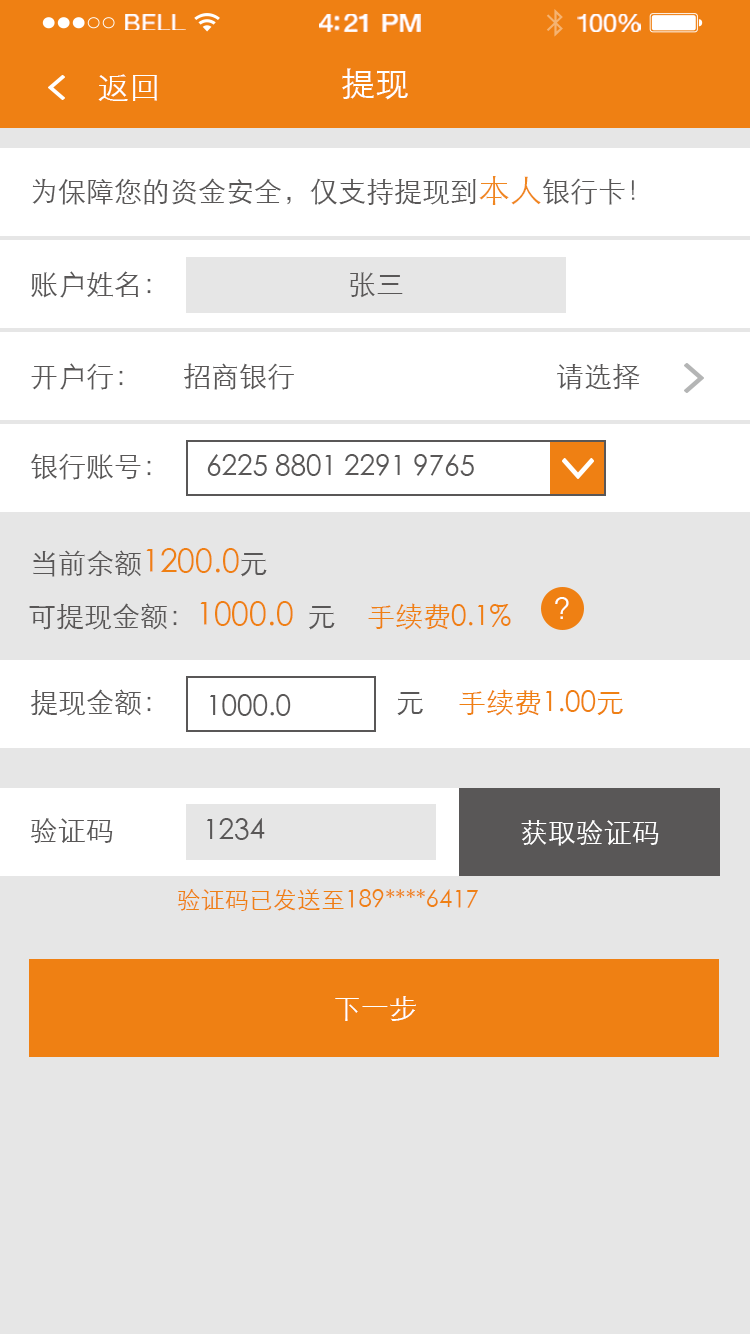
<style>
.page{position:relative;width:750px;height:1334px;background:#e6e6e6}
.page>*{position:absolute;margin:0}
.t1{font:23.3px "HelveticaNeue";letter-spacing:0.02em;color:#ffffff;scale:1.06 1}
.t2{font:25.3px "HelveticaNeue-Medium";letter-spacing:-0.02em;color:#ffffff;scale:1.06 1}
.t3{font:24.3px "HelveticaNeue";letter-spacing:-0.02em;color:#ffffff;scale:1.06 1}
.t4{font:32px "STXihei";color:#ffffff}
.t5{font:34px "STXihei";color:#ffffff}
.t6{font:28px "STXihei";color:#595757}
.t7{font:32px "STXihei";color:#f08720}
.t8{font:32px "STXihei";color:#ef8013}
.t9{font:28px "STXihei";color:#ef8013}
.t10{font:28px "STXihei";color:#ffffff}
.t11{font:24px "STXihei";color:#ef8013}
</style>
<div class="page">
<p class="t1" style="left:125px;top:14px;width:61px;height:16px">BELL</p>
<p class="t2" style="left:319px;top:14px;width:102px;height:18px">4:21 PM</p>
<p class="t3" style="left:577px;top:14px;width:64px;height:18px">100%</p>
<p class="t4" style="left:98px;top:74px;width:59px;height:27px">返回</p>
<p class="t5" style="left:342px;top:68px;width:66px;height:32px">提现</p>
<p class="t6" style="left:32px;top:176px;width:603px;height:29px">为保障您的资金安全，仅支持提现到<span class="t7">本人</span>银行卡！</p>
<p class="t6" style="left:31px;top:271px;width:120px;height:27px">账户姓名：</p>
<p class="t6" style="left:350px;top:272px;width:53px;height:26px">张三</p>
<p class="t6" style="left:31px;top:363px;width:92px;height:27px">开户行：</p>
<p class="t6" style="left:184px;top:363px;width:110px;height:27px">招商银行</p>
<p class="t6" style="left:557px;top:363px;width:83px;height:27px">请选择</p>
<p class="t6" style="left:30px;top:453px;width:121px;height:27px">银行账号：</p>
<p class="t6" style="left:207px;top:454px;width:267px;height:22px">6225 8801 2291 9765</p>
<p class="t8" style="left:33px;top:548px;width:234px;height:29px"><span class="t6">当前余额</span>1200.0<span class="t6">元</span></p>
<p class="t6" style="left:29px;top:601px;width:306px;height:29px">可提现金额：<span class="t8">1000.0</span>  元</p>
<p class="t9" style="left:368px;top:603px;width:143px;height:27px">手续费0.1%</p>
<p class="t4" style="left:555px;top:597px;width:14px;height:22px">？</p>
<p class="t6" style="left:31px;top:689px;width:120px;height:27px">提现金额：</p>
<p class="t9" style="left:459px;top:689px;width:164px;height:27px">手续费1.00元</p>
<p class="t6" style="left:210px;top:694px;width:81px;height:22px">1000.0</p>
<p class="t6" style="left:397px;top:692px;width:26px;height:24px">元</p>
<p class="t6" style="left:31px;top:818px;width:82px;height:25px">验证码</p>
<p class="t6" style="left:207px;top:818px;width:58px;height:22px">1234</p>
<p class="t10" style="left:521px;top:820px;width:138px;height:26px">获取验证码</p>
<p class="t11" style="left:177px;top:889px;width:301px;height:22px">验证码已发送至189****6417</p>
<p class="t10" style="left:335px;top:996px;width:81px;height:25px">下一步</p>
</div>
